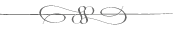
<style>
.page{position:relative;width:173px;height:29px;background:#ffffff}
.page>*{position:absolute;margin:0}
.t1{font:21.2px "SomeWeatzSwashes";letter-spacing:0.1em;color:#666666}
</style>
<div class="page">
<p class="t1" style="left:39px;top:5px;width:47px;height:19px">S</p>
<p class="t1" style="left:80px;top:6px;width:47px;height:19px;rotate:180deg">S</p>
</div>
